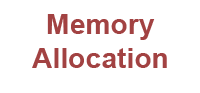
<style>
.page{position:relative;width:200px;height:93px;background:#ffffff}
.page>*{position:absolute;margin:0}
.t1{font:27.9px "Arial-BoldMT";color:#a24242}
</style>
<div class="page">
<p class="t1" style="left:32px;top:14px;width:135px;height:54px;text-align:center">Memory<br>Allocation</p>
</div>
